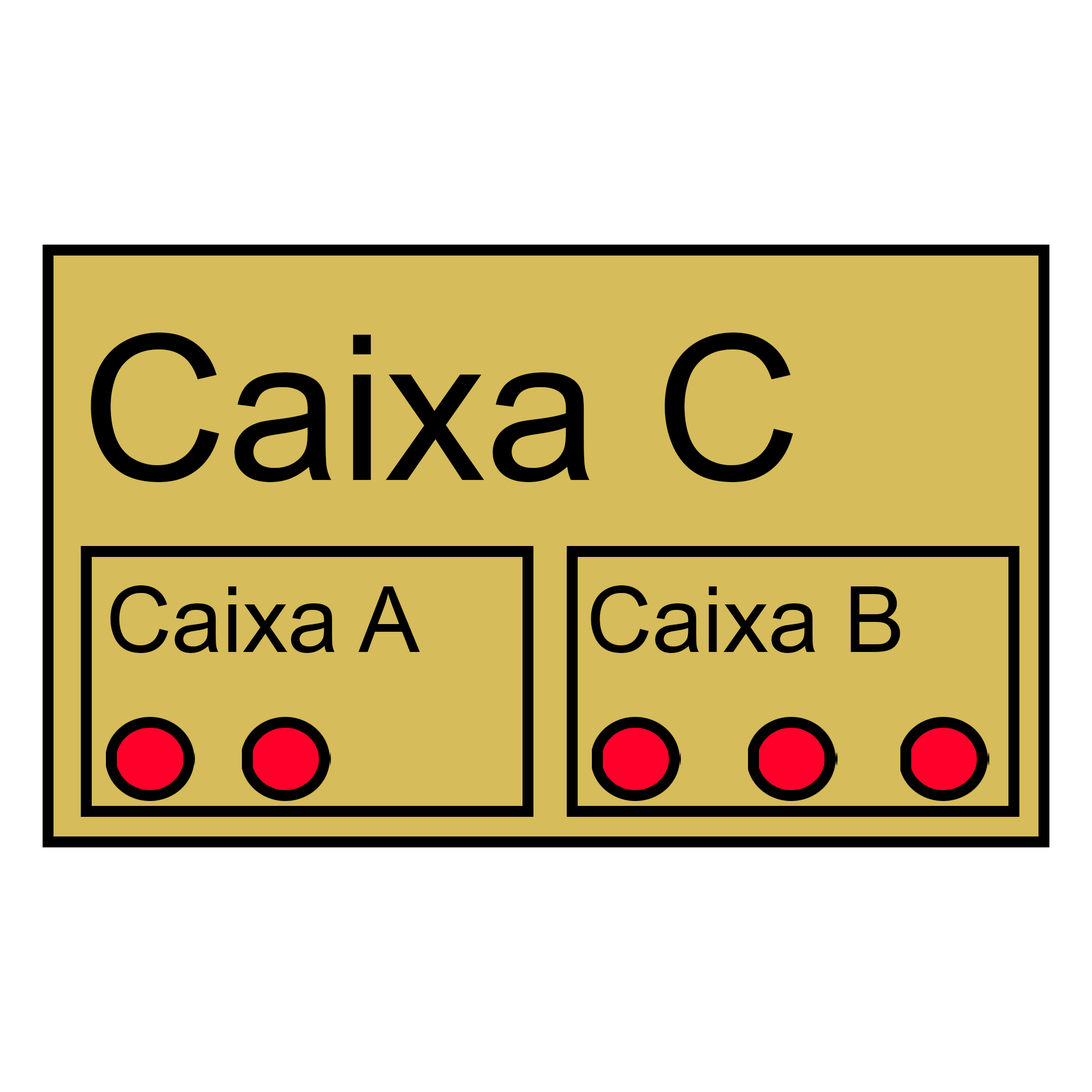
<style>
.page{position:relative;width:1092px;height:1092px;background:#ffffff}
.page>*{position:absolute;margin:0}
.t1{font:202.4px "ArialMT";color:#000000}
.t2{font:91px "ArialMT";color:#000000}
</style>
<div class="page">
<p class="t1" style="left:91px;top:333px;width:702px;height:149px">Caixa C</p>
<p class="t2" style="left:110px;top:585px;width:310px;height:68px">Caixa A</p>
<p class="t2" style="left:591px;top:585px;width:309px;height:68px">Caixa B</p>
</div>
